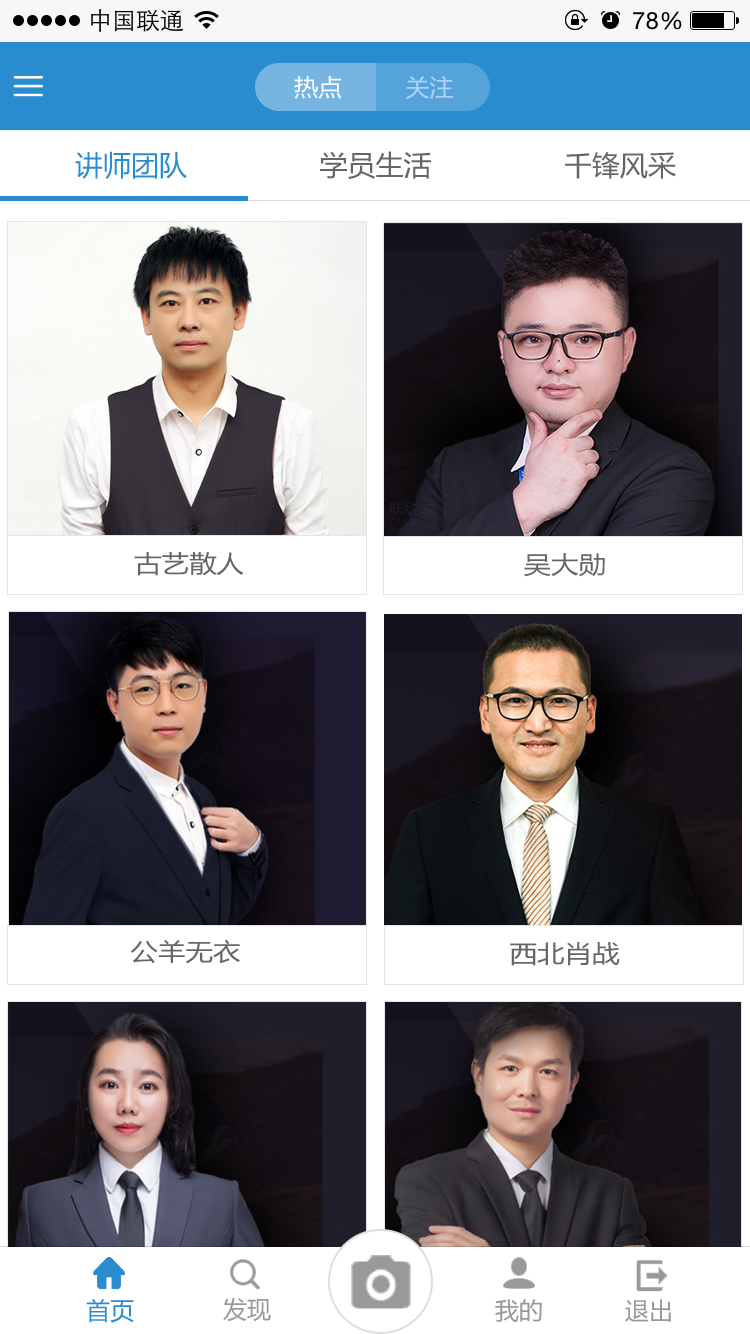
<style>
.page{position:relative;width:750px;height:1334px;background:#ffffff}
.page>*{position:absolute;margin:0}
.t1{font:24px "MicrosoftYaHei";color:#ffffff}
.t2{font:24px "MicrosoftYaHei";color:#b2d1ff}
.t3{font:28px "MicrosoftYaHei";color:#666666}
.t4{font:28px "MicrosoftYaHei";color:#298ccf}
.t5{font:24px/38px "MicrosoftYaHei";color:#666666;scale:1.14 1}
.t6{font:24px "MicrosoftYaHei";color:#666666;scale:1.14 1}
.t7{font:24px "MicrosoftYaHei";color:#298ccf}
.t8{font:24px "MicrosoftYaHei";color:#999999}
</style>
<div class="page">
<p class="t1" style="left:294px;top:75px;width:159px;height:24px">热点         <span class="t2">关注</span></p>
<p class="t3" style="left:75px;top:151px;width:601px;height:28px"><span class="t4">讲师团队                </span>学员生活                千锋风采</p>
<p class="t5" style="left:134px;top:552px;width:110px;height:24px;text-align:center">古艺散人<br><br>散人</p>
<p class="t6" style="left:524px;top:553px;width:81px;height:24px">吴大勋</p>
<p class="t6" style="left:131px;top:939px;width:109px;height:25px">公羊无衣</p>
<p class="t6" style="left:510px;top:942px;width:110px;height:24px">西北肖战</p>
<p class="t7" style="left:86px;top:1299px;width:48px;height:24px">首页</p>
<p class="t8" style="left:223px;top:1298px;width:48px;height:24px">发现</p>
<p class="t8" style="left:495px;top:1299px;width:47px;height:23px">我的</p>
<p class="t8" style="left:625px;top:1299px;width:46px;height:23px">退出</p>
</div>
